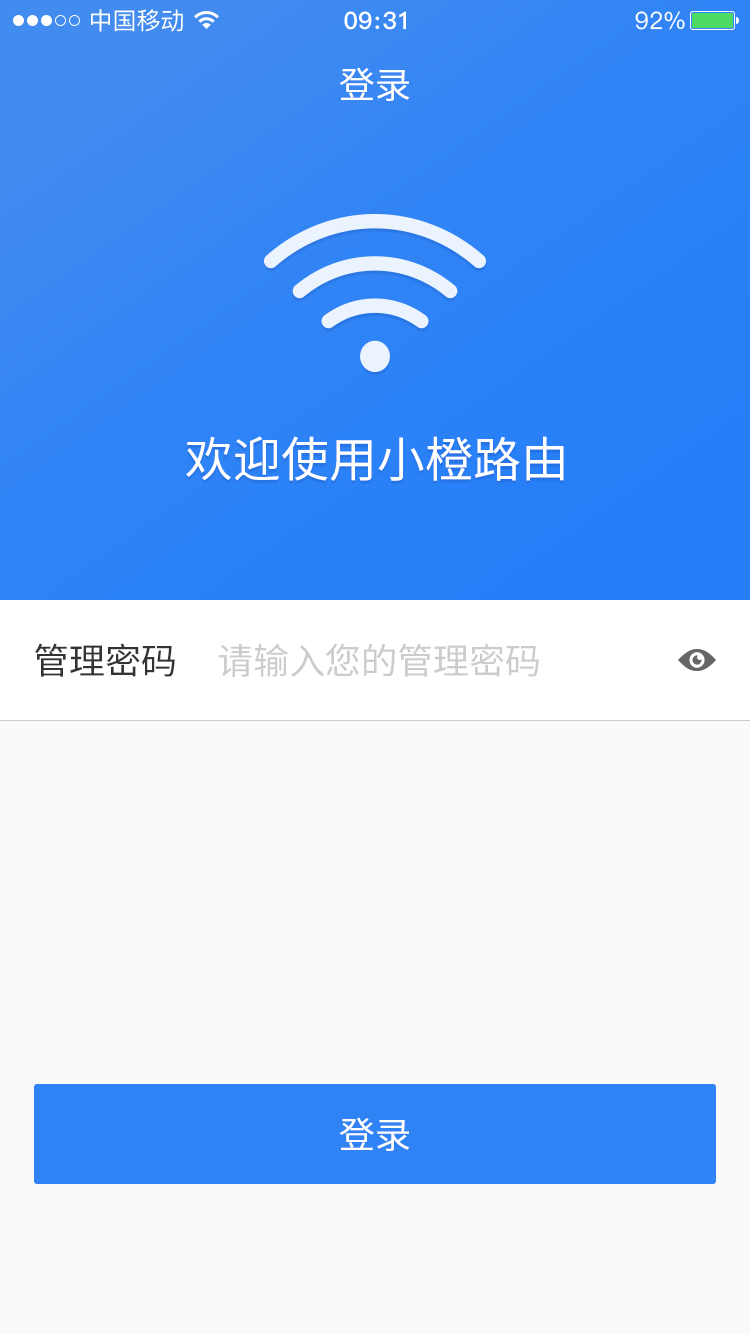
<style>
.page{position:relative;width:750px;height:1334px;background:#fafafa}
.page>*{position:absolute;margin:0}
.t1{font:36px "SourceHanSansCN-Regular";color:#ffffff}
.t2{font:48px "SourceHanSansCN-Regular";color:#ffffff}
.t3{font:36px "SourceHanSansCN-Regular";color:#333333}
.t4{font:36px "SourceHanSansCN-Regular";color:#cccccc}
</style>
<div class="page">
<p class="t1" style="left:339px;top:67px;width:71px;height:34px">登录</p>
<p class="t2" style="left:186px;top:436px;width:378px;height:45px">欢迎使用小橙路由</p>
<p class="t3" style="left:35px;top:643px;width:140px;height:34px">管理密码</p>
<p class="t4" style="left:218px;top:643px;width:321px;height:34px">请输入您的管理密码</p>
<p class="t1" style="left:339px;top:1117px;width:71px;height:34px">登录</p>
</div>
